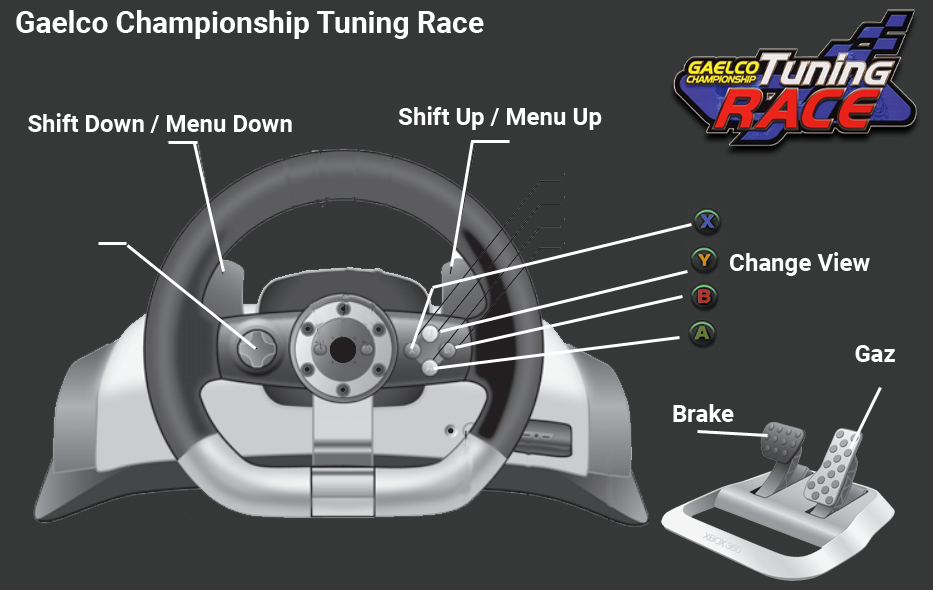
<style>
.page{position:relative;width:933px;height:590px;background:#363838}
.page>*{position:absolute;margin:0}
.t1{font:30px "Roboto-Bold";color:#ffffff}
.t2{font:24px "Roboto-Bold";color:#ffffff}
</style>
<div class="page">
<p class="t1" style="left:16px;top:10px;width:468px;height:29px">Gaelco Championship Tuning Race</p>
<p class="t2" style="left:28px;top:113px;width:264px;height:20px">Shift Down / Menu Down</p>
<p class="t2" style="left:398px;top:106px;width:204px;height:24px">Shift Up / Menu Up</p>
<p class="t2" style="left:730px;top:252px;width:140px;height:24px">Change View</p>
<p class="t2" style="left:855px;top:345px;width:40px;height:17px">Gaz</p>
<p class="t2" style="left:673px;top:404px;width:61px;height:18px">Brake</p>
</div>
